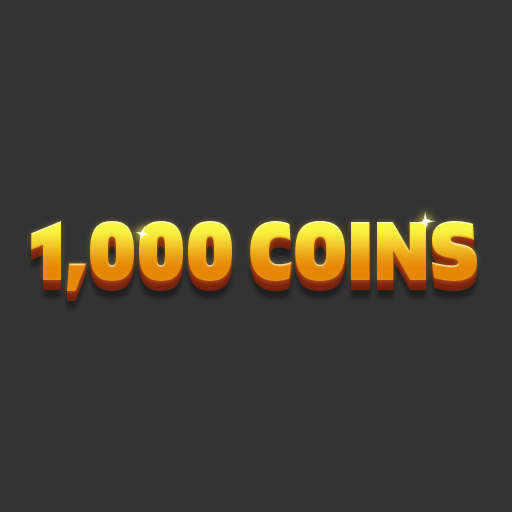
<style>
.page{position:relative;width:512px;height:512px;background:#333333}
.page>*{position:absolute;margin:0}
.t1{font:83.3px "Gilam-BlackDEMO";letter-spacing:-0.005em;scale:0.95 1}
</style>
<div class="page">
<p class="t1" style="left:31px;top:221px;width:446px;height:70px">1,000 COINS</p>
</div>
